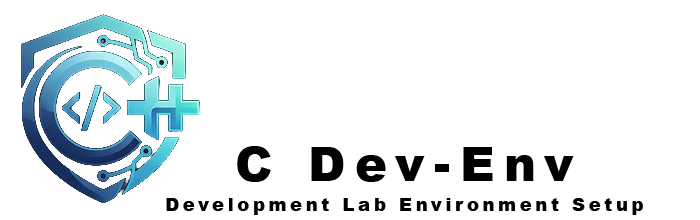
<style>
.page{position:relative;width:700px;height:220px;background:#ffffff}
.page>*{position:absolute;margin:0}
.t1{font:18px/30px "Arial-Black";letter-spacing:0.2em;color:#000000}
.t2{font:48px/30px "Arial-Black";letter-spacing:0.2em;color:#000000}
</style>
<div class="page">
<p class="t1" style="left:166px;top:146px;width:477px;height:69px;text-align:center"><span class="t2">C Dev-Env<br></span>Development Lab Environment Setup</p>
</div>
